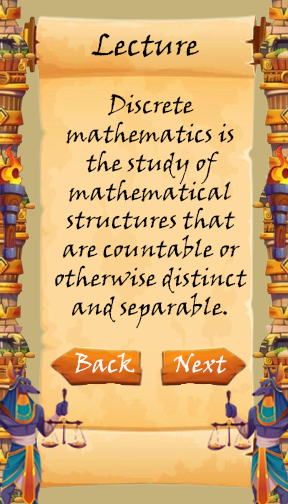
<style>
.page{position:relative;width:288px;height:504px}
.page>*{position:absolute;margin:0}
.t1{font:30px "VinerHandITC";color:#080707}
.t2{font:24px "VinerHandITC";color:#080707}
.t3{font:24px "VinerHandITC";color:#fdf9f9}
</style>
<div class="page">
<p class="t1" style="left:91px;top:33px;width:108px;height:25px">Lecture</p>
<p class="t2" style="left:55px;top:94px;width:193px;height:235px;text-align:center">Discrete mathematics is the study of mathematical structures that are countable or otherwise distinct and separable.</p>
<p class="t3" style="left:75px;top:352px;width:60px;height:21px">Back</p>
<p class="t3" style="left:173px;top:353px;width:54px;height:21px">Next</p>
</div>
